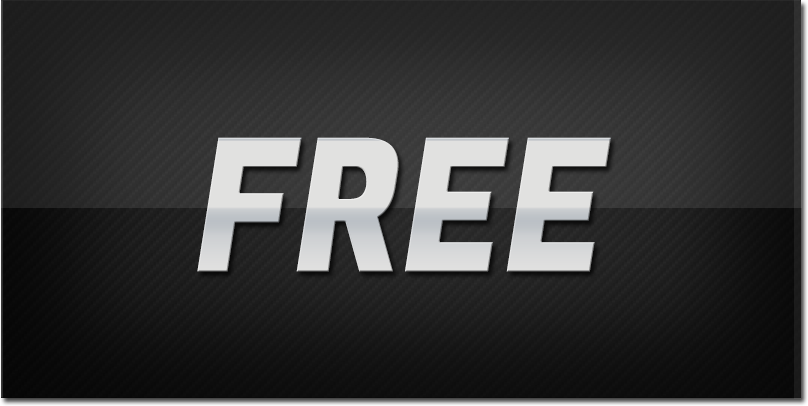
<style>
.page{position:relative;width:808px;height:406px}
.page>*{position:absolute;margin:0}
.t1{font:185.2px "FugazOne-Regular";color:#dfdfdf;scale:0.89 1}
</style>
<div class="page">
<p class="t1" style="left:197px;top:137px;width:414px;height:135px">FREE</p>
</div>
